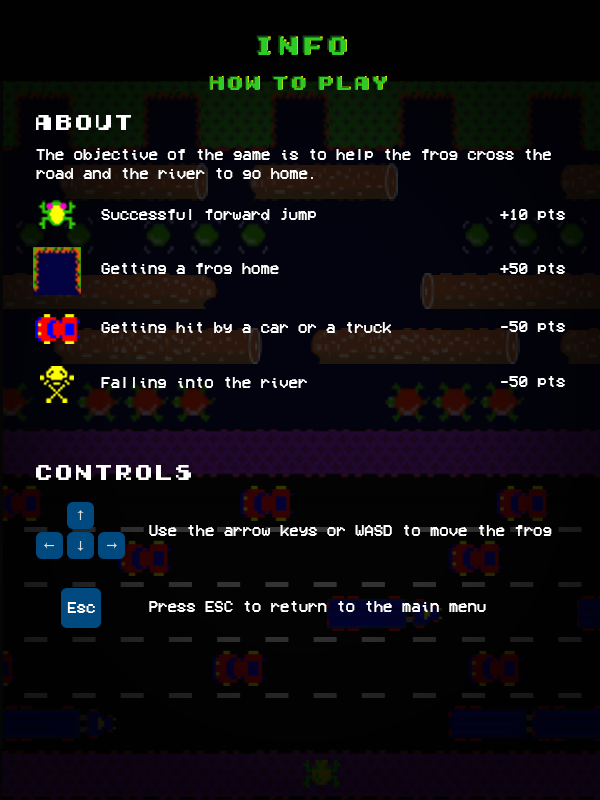
<style>
.page{position:relative;width:600px;height:800px}
.page>*{position:absolute;margin:0}
.t1{font:23.3px "Early-GameBoy";letter-spacing:0.05em}
.t2{font:23.3px "Early-GameBoy";letter-spacing:0.05em;color:#2fca24}
.t3{font:17.2px "Early-GameBoy";letter-spacing:0.05em}
.t4{font:17.2px "Early-GameBoy";letter-spacing:0.05em;color:#2fca24}
.t5{font:20px "Early-GameBoy";color:#ffffff}
.t6{font:16px "VCROSDMono";color:#ffffff}
</style>
<div class="page">
<p class="t1" style="left:256px;top:35px;width:89px;height:18px">INFO</p>
<p class="t2" style="left:258px;top:37px;width:89px;height:18px">INFO</p>
<p class="t2" style="left:259px;top:36px;width:88px;height:18px">INFO</p>
<p class="t3" style="left:209px;top:76px;width:177px;height:13px">HOW TO PLAY</p>
<p class="t4" style="left:210px;top:76px;width:177px;height:13px">HOW TO PLAY</p>
<p class="t4" style="left:210px;top:77px;width:177px;height:13px">HOW TO PLAY</p>
<p class="t5" style="left:36px;top:115px;width:95px;height:15px">About</p>
<p class="t6" style="left:36px;top:148px;width:515px;height:31px">The objective of the game is to help the frog cross the road and the river to go home.</p>
<p class="t6" style="left:101px;top:208px;width:215px;height:12px">Successful forward jump</p>
<p class="t6" style="left:500px;top:209px;width:65px;height:11px">+10 pts</p>
<p class="t6" style="left:101px;top:263px;width:178px;height:11px">Getting a frog home</p>
<p class="t6" style="left:500px;top:263px;width:65px;height:11px">+50 pts</p>
<p class="t6" style="left:101px;top:322px;width:290px;height:11px">Getting hit by a car or a truck</p>
<p class="t6" style="left:501px;top:321px;width:64px;height:11px">-50 pts</p>
<p class="t6" style="left:101px;top:377px;width:206px;height:11px">Falling into the river</p>
<p class="t6" style="left:501px;top:376px;width:64px;height:11px">-50 pts</p>
<p class="t5" style="left:36px;top:465px;width:155px;height:15px">CONTROLS</p>
<p class="t6" style="left:149px;top:525px;width:403px;height:11px">Use the arrow keys or WASD to move the frog</p>
<p class="t6" style="left:67px;top:602px;width:28px;height:11px">Esc</p>
<p class="t6" style="left:149px;top:601px;width:337px;height:11px">Press ESC to return to the main menu</p>
</div>
